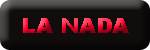
<style>
.page{position:relative;width:150px;height:50px;background:#110d0d}
.page>*{position:absolute;margin:0}
.t1{font:20px "Arial-Black";letter-spacing:0.04em;scale:1.05 1}
</style>
<div class="page">
<p class="t1" style="left:23px;top:18px;width:106px;height:15px">LA NADA</p>
</div>
